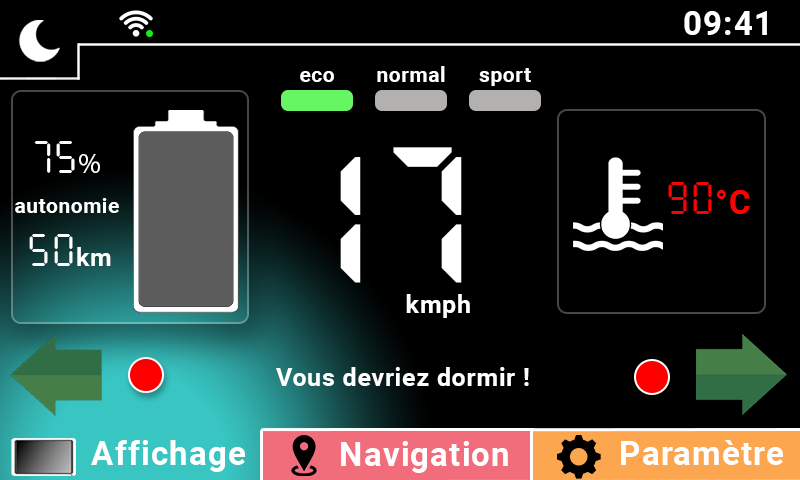
<style>
.page{position:relative;width:800px;height:480px;background:#000000}
.page>*{position:absolute;margin:0}
.t1{font:33.4px "Roboto-Bold";letter-spacing:0.03em;color:#ffffff}
.t2{font:20.8px "Roboto-Bold";letter-spacing:0.03em;color:#ffffff}
.t3{font:45.9px "SevenSegmentRegular";letter-spacing:0.03em;color:#ffffff}
.t4{font:29.2px "MyriadPro-Regular";letter-spacing:0.03em;color:#ffffff}
.t5{font:154.2px "7SegmentBold";letter-spacing:0.03em;color:#ffffff}
.t6{font:45.9px "SevenSegmentRegular";letter-spacing:0.03em;color:#ff0101}
.t7{font:33.4px "Roboto-Bold";letter-spacing:0.03em;color:#ff0101}
.t8{font:20.9px "Roboto-Bold";letter-spacing:0.03em;color:#ffffff}
.t9{font:25px "Roboto-Bold";letter-spacing:0.03em;color:#ffffff}
</style>
<div class="page">
<p class="t1" style="left:684px;top:11px;width:83px;height:24px">09:41</p>
<p class="t2" style="left:300px;top:71px;width:34px;height:11px">eco</p>
<p class="t2" style="left:377px;top:66px;width:68px;height:16px">normal</p>
<p class="t2" style="left:479px;top:68px;width:52px;height:18px">sport</p>
<p class="t3" style="left:34px;top:141px;width:66px;height:32px">75<span class="t4">%</span></p>
<p class="t5" style="left:340px;top:147px;width:122px;height:136px">17</p>
<p class="t6" style="left:668px;top:182px;width:82px;height:32px">90<span class="t7">°C</span></p>
<p class="t8" style="left:15px;top:198px;width:104px;height:15px">autonomie</p>
<p class="t3" style="left:29px;top:234px;width:82px;height:32px">50<span class="t9">km</span></p>
<p class="t9" style="left:406px;top:294px;width:64px;height:24px">kmph</p>
<p class="t9" style="left:276px;top:367px;width:253px;height:19px">Vous devriez dormir !</p>
<p class="t1" style="left:91px;top:440px;width:154px;height:32px">Affichage</p>
<p class="t1" style="left:341px;top:441px;width:167px;height:32px">Navigation</p>
<p class="t1" style="left:621px;top:440px;width:162px;height:25px">Paramètre</p>
</div>
